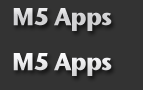
<style>
.page{position:relative;width:143px;height:90px;background:#333333}
.page>*{position:absolute;margin:0}
.t1{font:24px "StoneSansITC-Bold";letter-spacing:-0.04em;color:#d1d1d3}
.t2{font:24px "StoneSansITC-Bold";letter-spacing:-0.04em;color:#fbfbfd}
</style>
<div class="page">
<p class="t1" style="left:13px;top:8px;width:99px;height:23px">M5 Apps</p>
<p class="t2" style="left:13px;top:53px;width:99px;height:23px">M5 Apps</p>
</div>
